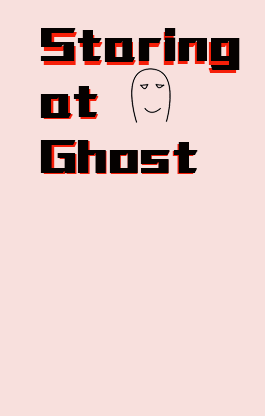
<style>
.page{position:relative;width:265px;height:416px;background:#f8e0dd}
.page>*{position:absolute;margin:0}
.t1{font:56px "huxiaobo-gdh";color:#050100;font-weight:bold;scale:0.83 1}
.t2{font:54.4px "huxiaobo-gdh";color:#050100;font-weight:bold;scale:0.83 1}
</style>
<div class="page">
<p class="t1" style="left:40px;top:28px;width:200px;height:145px">Staring <br>at<br>Ghost</p>
<p class="t2" style="left:43px;top:32px;width:194px;height:142px">Staring <br>at<br>Ghost</p>
</div>
